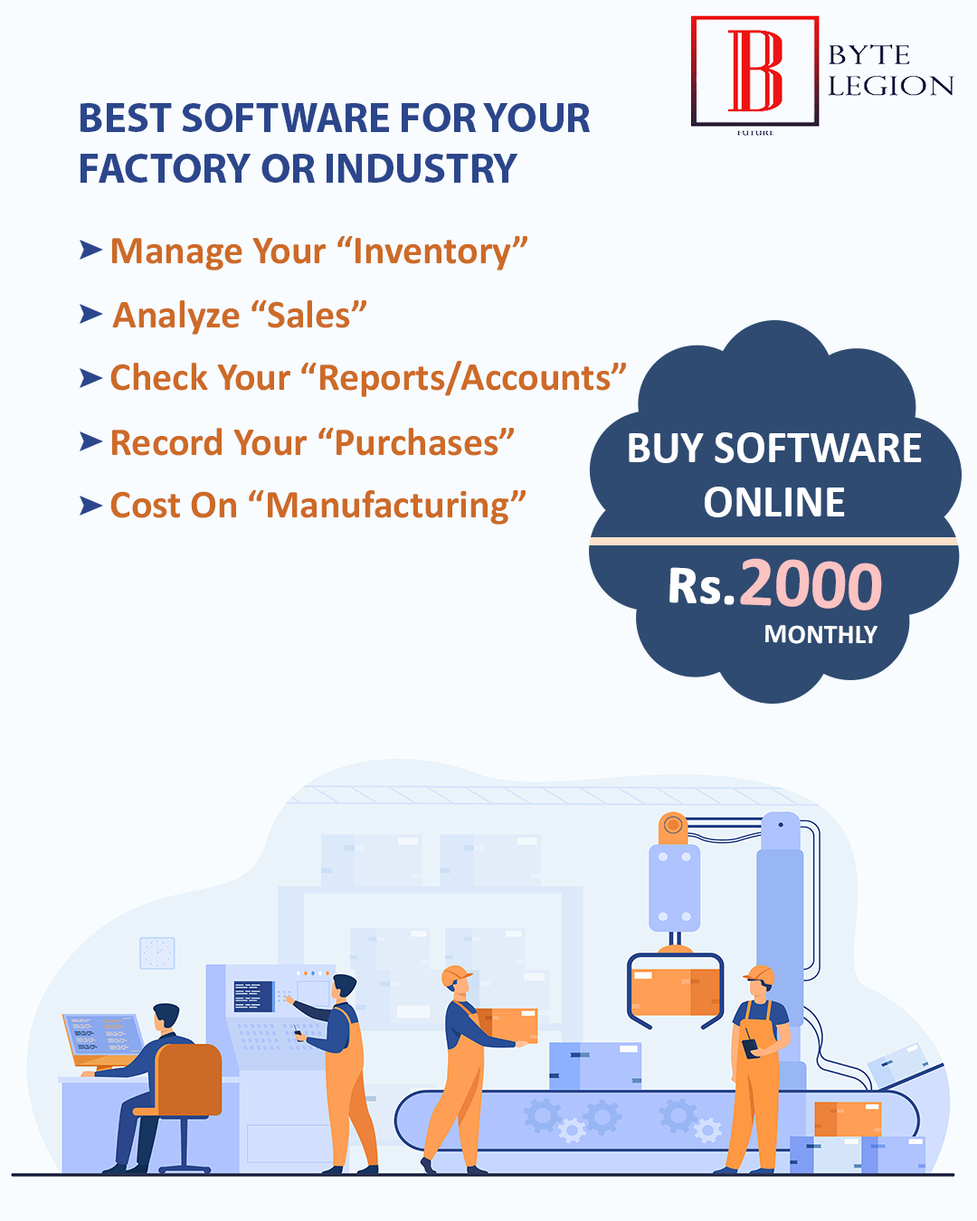
<style>
.page{position:relative;width:977px;height:1221px;background:#f8fcff}
.page>*{position:absolute;margin:0}
.t1{font:42.2px "MyriadPro-Bold";color:#2b468b;text-transform:uppercase}
.t2{font:39.7px "Calibri-Bold";color:#cd6a27}
.t3{font:45.2px "Calibri-Bold";color:#ffffff;text-transform:uppercase}
.t4{font:71.9px "Calibri-Bold";color:#fcc3c3;text-transform:uppercase}
.t5{font:53.9px "Calibri-Bold";color:#ffffff;text-transform:uppercase;font-weight:bold}
.t6{font:53.9px "Calibri-Bold";color:#ffffff;font-weight:bold}
.t7{font:27.1px "Calibri-Bold";color:#ffffff;text-transform:uppercase}
</style>
<div class="page">
<p class="t1" style="left:80px;top:103px;width:511px;height:80px">Best Software for your<br>Factory or Industry</p>
<p class="t2" style="left:112px;top:236px;width:415px;height:34px">Manage Your “Inventory”</p>
<p class="t2" style="left:112px;top:300px;width:254px;height:35px">Analyze “Sales”</p>
<p class="t2" style="left:110px;top:361px;width:516px;height:36px">Check Your “Reports/Accounts”</p>
<p class="t2" style="left:112px;top:428px;width:402px;height:28px">Record Your “Purchases”</p>
<p class="t3" style="left:629px;top:432px;width:293px;height:85px;text-align:center">Buy Software<br>online</p>
<p class="t2" style="left:110px;top:490px;width:415px;height:35px">Cost On “Manufacturing”</p>
<p class="t4" style="left:669px;top:558px;width:213px;height:52px;rotate:2deg"><span class="t5">R</span><span class="t6">s</span><span class="t5">.</span>2000</p>
<p class="t7" style="left:765px;top:625px;width:112px;height:19px;rotate:1deg">monthly</p>
</div>
